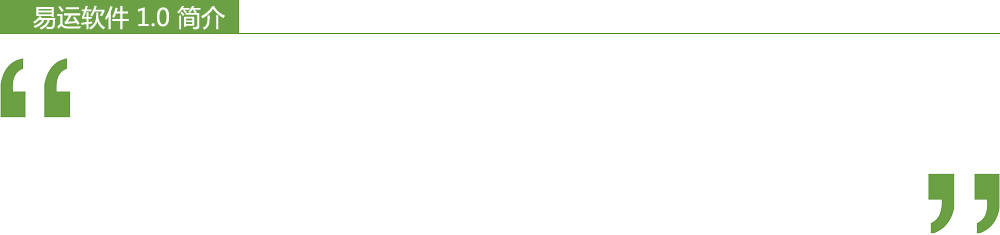
<style>
.page{position:relative;width:1000px;height:235px;background:#ffffff}
.page>*{position:absolute;margin:0}
.t1{font:24px "MicrosoftYaHei";color:#ffffff}
</style>
<div class="page">
<p class="t1" style="left:33px;top:5px;width:192px;height:25px">易运软件 1.0 简介</p>
</div>
